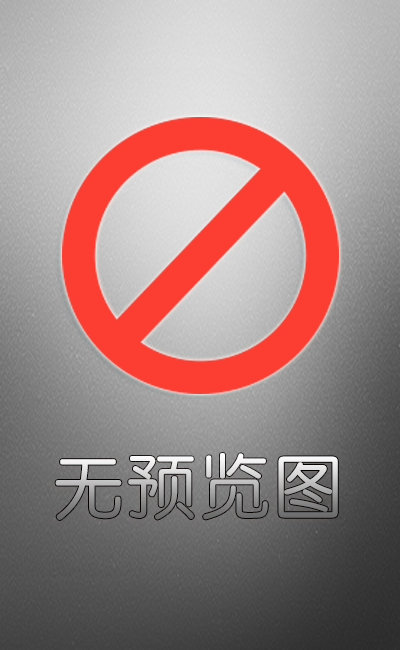
<style>
.page{position:relative;width:400px;height:650px}
.page>*{position:absolute;margin:0}
.t1{font:69.1px "STYuanti-SC-Regular";letter-spacing:0.06em;text-transform:uppercase}
</style>
<div class="page">
<p class="t1" style="left:55px;top:453px;width:283px;height:67px">无预览图</p>
</div>
